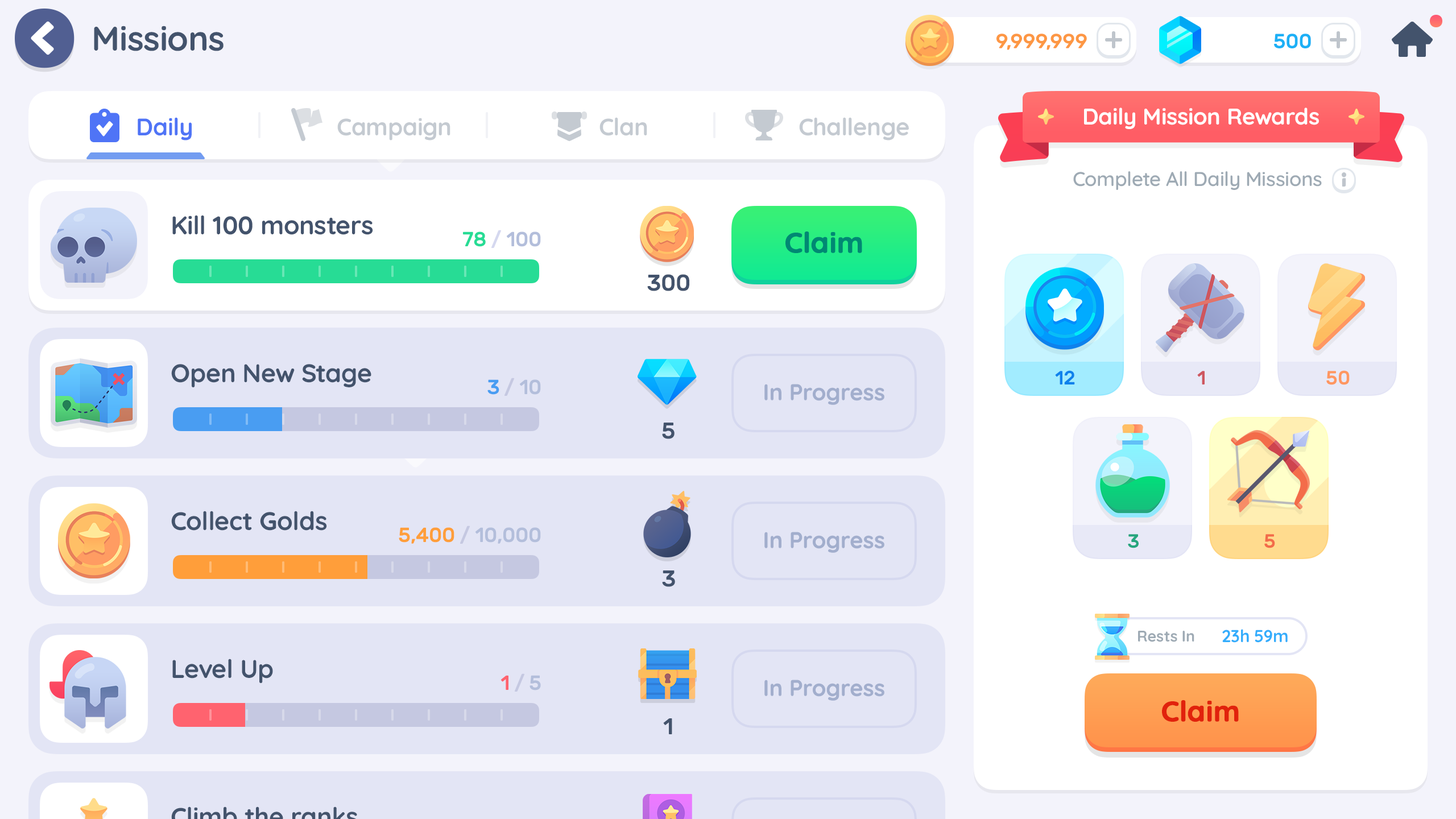
<style>
.page{position:relative;width:1456px;height:819px;background:#ffffff}
.page>*{position:absolute;margin:0}
.t1{font:34.1px "Quicksand-Bold";letter-spacing:-0.01em;color:#43536c}
.t2{font:20.5px "Rubik-Medium";letter-spacing:-0.01em;color:#fd9744;text-transform:uppercase}
.t3{font:20.5px "Rubik-Medium";letter-spacing:-0.01em;color:#1cb0f6;text-transform:uppercase}
.t4{font:22.7px "Quicksand-Bold";letter-spacing:-0.01em;color:#ffffff}
.t5{font:23.9px "Quicksand-Bold";letter-spacing:-0.01em;color:#4f74f6}
.t6{font:23.9px "Quicksand-Bold";letter-spacing:-0.01em;color:#c4cad1}
.t7{font:19.9px "Quicksand-SemiBold";letter-spacing:-0.01em;color:#9eaab4}
.t8{font:25.6px "Quicksand-Bold";letter-spacing:-0.01em;color:#43536c}
.t9{font:20.5px "Rubik-Medium";letter-spacing:-0.01em;color:#b3bedb}
.t10{font:20.5px "Rubik-Medium";letter-spacing:-0.01em;color:#27dc95}
.t11{font:20.5px "Rubik-Medium";letter-spacing:-0.01em;color:#d5d8ef}
.t12{font:28.4px "Quicksand-Bold";color:#008873;font-weight:bold}
.t13{font:22.7px "Rubik-Medium";letter-spacing:-0.01em;color:#43536c}
.t14{font:20.5px "Rubik-Medium";letter-spacing:-0.01em;color:#499df2}
.t15{font:20.5px "Rubik-Medium";letter-spacing:-0.01em;color:#c5c8e1}
.t16{font:19.3px "Rubik-Medium";letter-spacing:-0.01em;color:#0e81ec}
.t17{font:19.3px "Rubik-Medium";letter-spacing:-0.01em;color:#ce5760}
.t18{font:19.3px "Rubik-Medium";letter-spacing:-0.01em;color:#ff9761}
.t19{font:22.7px "Quicksand-Bold";color:#a2aecd}
.t20{font:20.5px "Rubik-Medium";letter-spacing:-0.01em;color:#ff9e3a}
.t21{font:19.3px "Rubik-Medium";letter-spacing:-0.01em;color:#26a67e}
.t22{font:19.3px "Rubik-Medium";letter-spacing:-0.01em;color:#f36c4a}
.t23{font:17.1px "Quicksand-Bold";letter-spacing:-0.01em;color:#34adfc}
.t24{font:15.4px "Quicksand-Bold";letter-spacing:-0.01em;color:#9eaab4}
.t25{font:20.5px "Rubik-Medium";letter-spacing:-0.01em;color:#ff636f}
.t26{font:28.4px "Quicksand-Bold";color:#e1220c;font-weight:bold}
</style>
<div class="page">
<p class="t1" style="left:94px;top:26px;width:130px;height:25px">Missions</p>
<p class="t2" style="left:996px;top:34px;width:91px;height:16px">9,999,999</p>
<p class="t3" style="left:1274px;top:34px;width:37px;height:14px">500</p>
<p class="t4" style="left:1084px;top:107px;width:235px;height:22px">Daily Mission Rewards</p>
<p class="t5" style="left:138px;top:117px;width:54px;height:23px">Daily</p>
<p class="t6" style="left:337px;top:118px;width:113px;height:22px">Campaign</p>
<p class="t6" style="left:599px;top:117px;width:48px;height:19px">Clan</p>
<p class="t6" style="left:799px;top:117px;width:110px;height:23px">Challenge</p>
<p class="t7" style="left:1073px;top:171px;width:249px;height:19px">Complete All Daily Missions</p>
<p class="t8" style="left:172px;top:215px;width:201px;height:20px">Kill 100 monsters</p>
<p class="t9" style="left:463px;top:230px;width:78px;height:18px"><span class="t10">78 </span><span class="t11">/ </span>100</p>
<p class="t12" style="left:785px;top:231px;width:77px;height:22px">Claim</p>
<p class="t13" style="left:647px;top:274px;width:42px;height:17px">300</p>
<p class="t8" style="left:171px;top:364px;width:200px;height:23px">Open New Stage</p>
<p class="t9" style="left:487px;top:378px;width:54px;height:18px"><span class="t14">3 </span><span class="t15">/</span> 10</p>
<p class="t16" style="left:1055px;top:370px;width:20px;height:14px">12</p>
<p class="t17" style="left:1197px;top:371px;width:8px;height:13px">1</p>
<p class="t18" style="left:1326px;top:370px;width:24px;height:15px">50</p>
<p class="t19" style="left:764px;top:384px;width:120px;height:21px">In Progress</p>
<p class="t13" style="left:662px;top:423px;width:13px;height:16px">5</p>
<p class="t8" style="left:171px;top:511px;width:156px;height:20px">Collect Golds</p>
<p class="t9" style="left:399px;top:526px;width:142px;height:18px"><span class="t20">5,400 </span><span class="t15">/ </span>10,000</p>
<p class="t19" style="left:764px;top:532px;width:120px;height:21px">In Progress</p>
<p class="t21" style="left:1128px;top:534px;width:11px;height:14px">3</p>
<p class="t22" style="left:1264px;top:534px;width:11px;height:14px">5</p>
<p class="t13" style="left:662px;top:570px;width:13px;height:17px">3</p>
<p class="t23" style="left:1222px;top:629px;width:66px;height:14px">23h 59m</p>
<p class="t24" style="left:1138px;top:631px;width:56px;height:11px">Rests In</p>
<p class="t8" style="left:172px;top:659px;width:101px;height:24px">Level Up</p>
<p class="t25" style="left:500px;top:673px;width:41px;height:19px">1 <span class="t15">/ </span><span class="t9">5</span></p>
<p class="t19" style="left:764px;top:680px;width:120px;height:21px">In Progress</p>
<p class="t26" style="left:1162px;top:700px;width:77px;height:22px">Claim</p>
<p class="t13" style="left:663px;top:718px;width:9px;height:16px">1</p>
</div>
